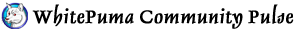
<style>
.page{position:relative;width:300px;height:32px;background:#ffffff}
.page>*{position:absolute;margin:0}
.t1{font:24px "DelphinLT-I";letter-spacing:-0.003em;color:#000000;font-weight:bold}
</style>
<div class="page">
<p class="t1" style="left:32px;top:4px;width:262px;height:25px">WhitePuma Community Pulse</p>
</div>
